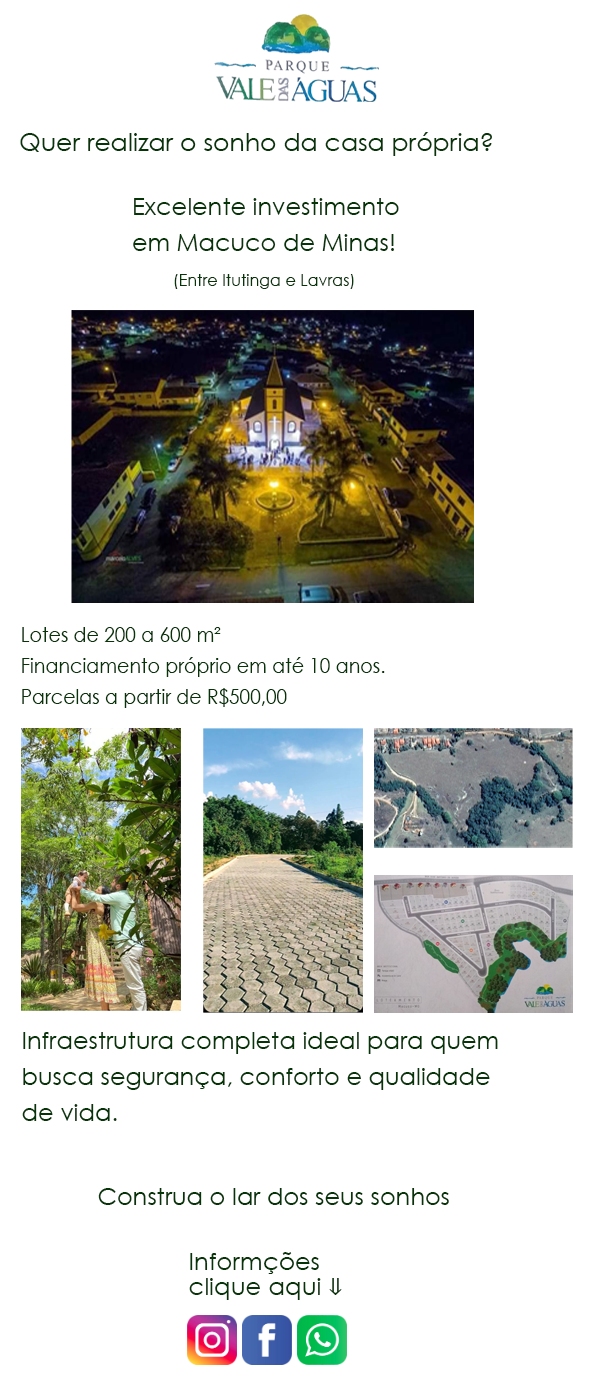
<style>
.page{position:relative;width:605px;height:1387px;background:#ffffff}
.page>*{position:absolute;margin:0}
.t1{font:25px "CenturyGothic";color:#053406}
.t2{font:24px/36px "CenturyGothic";color:#053406}
.t3{font:16px "CenturyGothic";color:#053406}
.t4{font:20.6px/30.9px "CenturyGothic";color:#053406;scale:0.92 1}
.t5{font:24px "CenturyGothic";color:#053406}
.t6{font:24.5px/24.5px "CenturyGothic";color:#053406}
.t7{font:24.5px/24.5px "CambriaMath";color:#053406}
</style>
<div class="page">
<p class="t1" style="left:20px;top:132px;width:472px;height:24px">Quer realizar o sonho da casa própria?</p>
<p class="t2" style="left:133px;top:198px;width:266px;height:53px">Excelente investimento <br>em Macuco de Minas!</p>
<p class="t3" style="left:174px;top:274px;width:180px;height:15px">(Entre Itutinga e Lavras)</p>
<p class="t4" style="left:22px;top:627px;width:363px;height:81px">Lotes de 200 a 600 m²<br>Financiamento próprio em até 10 anos.<br>Parcelas a partir de R$500,00</p>
<p class="t2" style="left:22px;top:1032px;width:476px;height:89px">Infraestrutura completa ideal para quem <br>busca segurança, conforto e qualidade<br>de vida.</p>
<p class="t5" style="left:98px;top:1188px;width:351px;height:17px">Construa o lar dos seus sonhos</p>
<p class="t6" style="left:189px;top:1252px;width:153px;height:48px">Informções<br>clique aqui <span class="t7">⇓</span></p>
</div>
